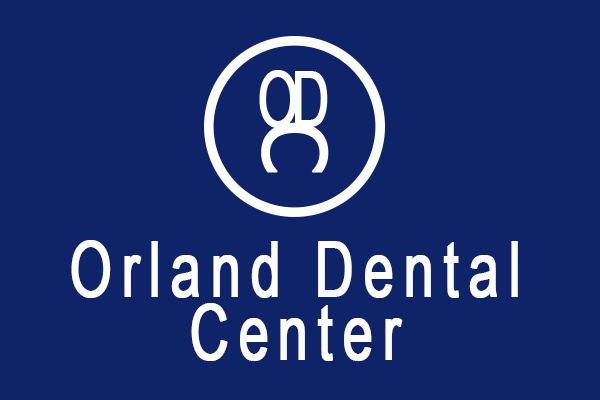
<style>
.page{position:relative;width:600px;height:400px;background:#0f2468}
.page>*{position:absolute;margin:0}
.t1{font:75.6px/63px "ArialMT";letter-spacing:0.15em;color:#ffffff;font-weight:bold;scale:0.72 1}
</style>
<div class="page">
<p class="t1" style="left:71px;top:240px;width:447px;height:121px;text-align:center">Orland Dental<br>Center</p>
</div>
